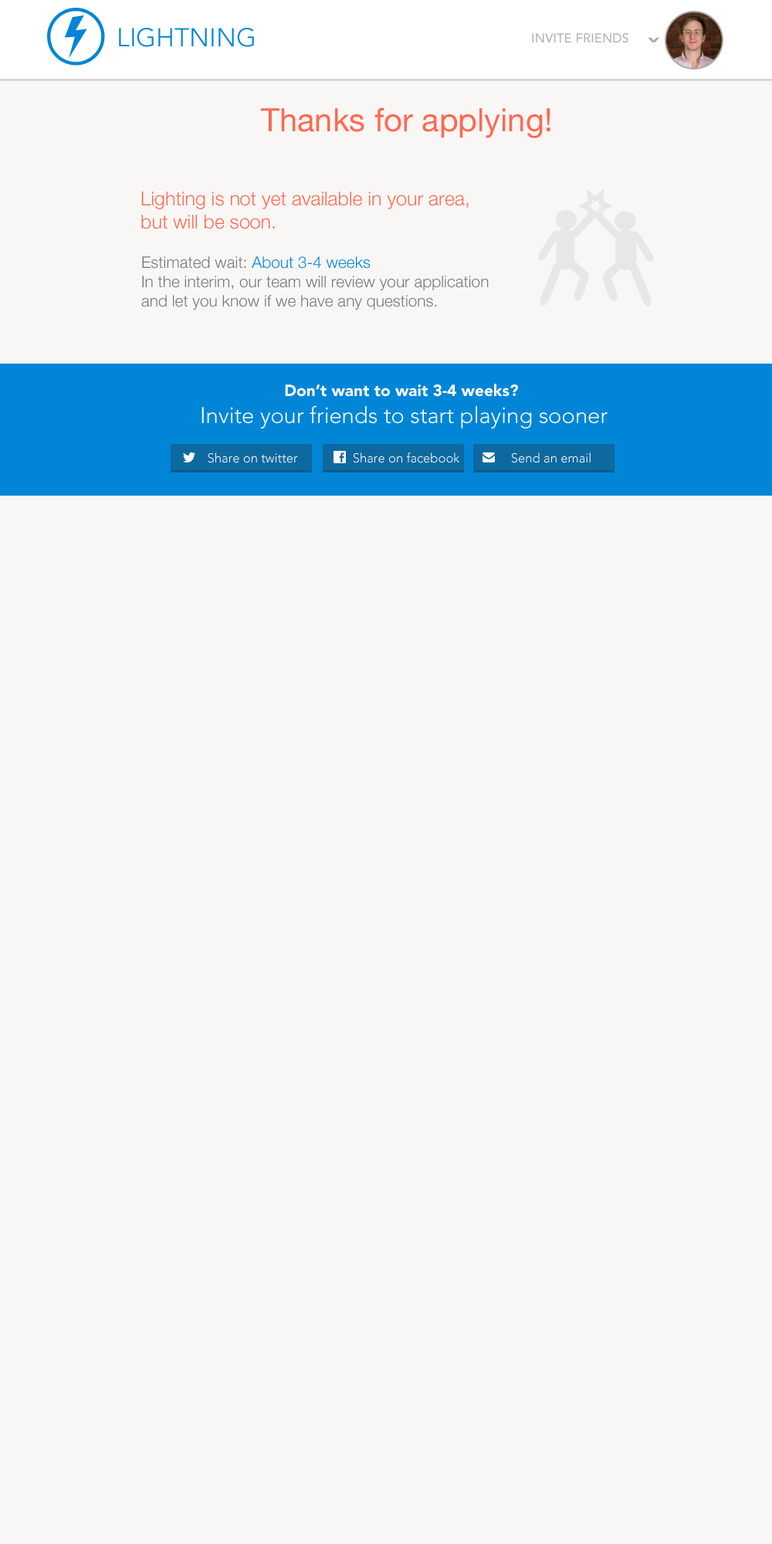
<style>
.page{position:relative;width:772px;height:1544px;background:#f9f7f6}
.page>*{position:absolute;margin:0}
.t1{font:25.7px "AvenirLTPro-Light";color:#0085d7;text-transform:uppercase}
.t2{font:12.9px "AvenirLTPro-Medium";color:#b2b2b2;text-transform:uppercase}
.t3{font:12.9px "AvenirLTPro-Black";color:#a9a9a9;text-transform:uppercase;scale:1.72 1}
.t4{font:32.2px "HelveticaNeue";color:#ff6950}
.t5{font:19.3px "HelveticaNeue-Light";color:#ff6950}
.t6{font:16.1px "HelveticaNeue-Light";color:#767676}
.t7{font:16.1px "HelveticaNeue-Light";color:#0085d7}
.t8{font:22.5px "AvenirLTPro-Light";color:#ffffff}
.t9{font:16.1px "AvenirLTPro-Black";color:#ffffff}
.t10{font:12.9px "AvenirLTPro-Light";color:#ffffff}
</style>
<div class="page">
<p class="t1" style="left:119px;top:28px;width:135px;height:19px">Lightning</p>
<p class="t2" style="left:532px;top:33px;width:97px;height:10px">Invite Friends</p>
<p class="t3" style="left:648px;top:37px;width:11px;height:5px;rotate:180deg">^</p>
<p class="t4" style="left:261px;top:107px;width:290px;height:31px">Thanks for applying!</p>
<p class="t5" style="left:141px;top:191px;width:328px;height:38px">Lighting is not yet available in your area, <br>but will be soon.</p>
<p class="t6" style="left:141px;top:256px;width:348px;height:54px">Estimated wait: <span class="t7">About 3-4 weeks<br></span>In the interim, our team will review your application <br>and let you know if we have any questions.</p>
<p class="t8" style="left:202px;top:384px;width:406px;height:45px;text-align:center"><span class="t9">Don’t want to wait 3-4 weeks? <br></span>Invite your friends to start playing sooner</p>
<p class="t10" style="left:208px;top:452px;width:90px;height:11px">Share on twitter</p>
<p class="t10" style="left:353px;top:452px;width:107px;height:11px">Share on facebook</p>
<p class="t10" style="left:511px;top:452px;width:80px;height:11px">Send an email</p>
</div>
